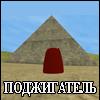
<style>
.page{position:relative;width:100px;height:100px}
.page>*{position:absolute;margin:0}
.t1{font:17.1px "TimesNewRomanPS-BoldMT";color:#f0f0f0;scale:0.7 1}
</style>
<div class="page">
<p class="t1" style="left:4px;top:82px;width:92px;height:14px">ПОДЖИГАТЕЛЬ</p>
</div>
